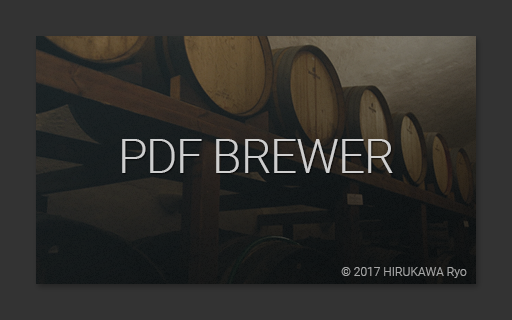
<style>
.page{position:relative;width:512px;height:320px;background:#333333}
.page>*{position:absolute;margin:0}
.t1{font:48px "Roboto-Light";letter-spacing:-0.025em;color:#cdcece}
.t2{font:12px "Roboto-Light";color:#a6a7a7}
</style>
<div class="page">
<p class="t1" style="left:122px;top:139px;width:271px;height:34px">PDF BREWER</p>
<p class="t2" style="left:341px;top:267px;width:126px;height:11px">© 2017 HIRUKAWA Ryo</p>
</div>
